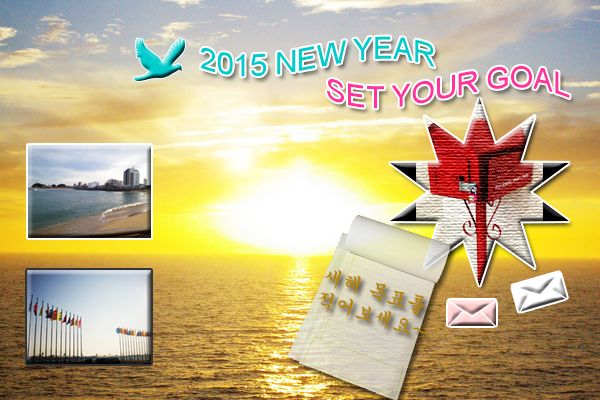
<style>
.page{position:relative;width:600px;height:400px}
.page>*{position:absolute;margin:0}
.t1{font:30.1px "ArialMT";color:#00cccc}
.t2{font:29.9px "ArialMT";color:#ff3399}
.t3{font:20px "Gungsuh";color:#b58300}
</style>
<div class="page">
<p class="t1" style="left:201px;top:36px;width:234px;height:41px">2015 NEW YEAR</p>
<p class="t2" style="left:327px;top:65px;width:243px;height:44px">SET YOUR GOAL</p>
<p class="t3" style="left:318px;top:269px;width:109px;height:65px;rotate:18deg">새해 목표를<br>적어보세요~</p>
</div>
